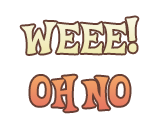
<style>
.page{position:relative;width:160px;height:128px;background:#ffffff}
.page>*{position:absolute;margin:0}
.t1{font:47.4px "CelestiaReduxMedium";color:#f3efc7}
.t2{font:47.4px "CelestiaReduxMedium";color:#ec8e64}
</style>
<div class="page">
<p class="t1" style="left:21px;top:17px;width:117px;height:37px">WEEE!</p>
<p class="t2" style="left:30px;top:75px;width:100px;height:37px">OH NO</p>
</div>
